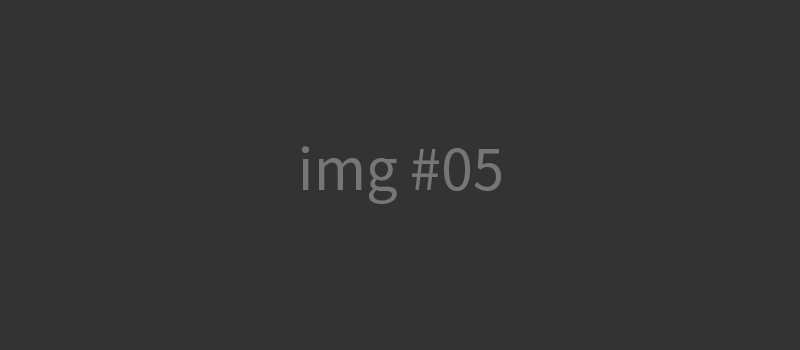
<style>
.page{position:relative;width:800px;height:350px;background:#333333}
.page>*{position:absolute;margin:0}
.t1{font:56.5px "NotoSansCJKkr-Regular";color:#767676}
</style>
<div class="page">
<p class="t1" style="left:302px;top:146px;width:199px;height:58px">img #05</p>
</div>
